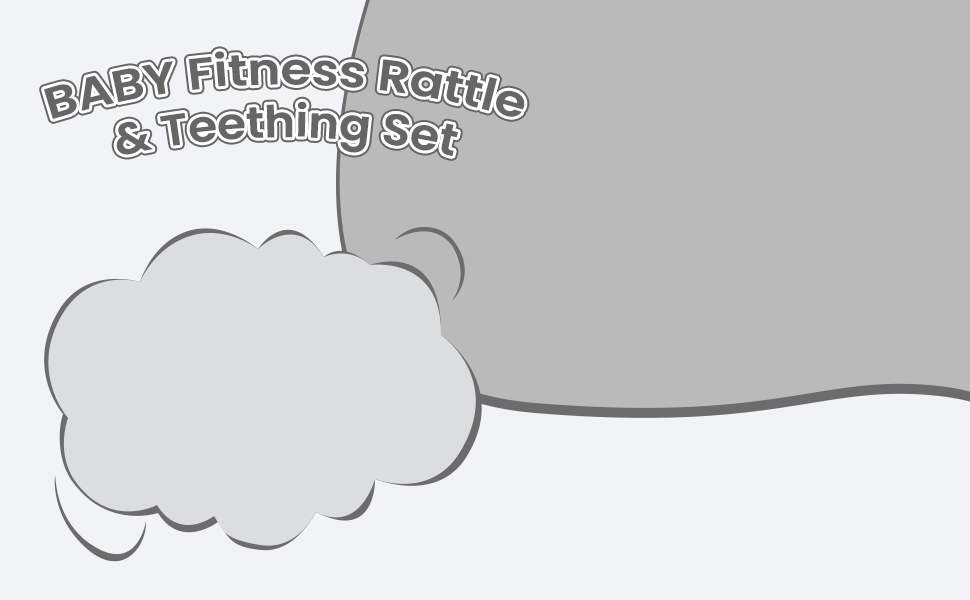
<style>
.page{position:relative;width:970px;height:600px;background:#bababa}
.page>*{position:absolute;margin:0}
.t1{font:44px "Poppins-SemiBold";color:#666666}
</style>
<div class="page">
<p class="t1" style="left:44px;top:51px;width:481px;height:105px;text-align:center">BABY Fitness Rattle<br>&amp; Teething Set</p>
</div>
